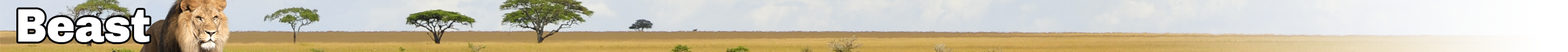
<style>
.page{position:relative;width:1568px;height:52px}
.page>*{position:absolute;margin:0}
.t1{font:47px "Chivo-Black";color:#ffffff}
</style>
<div class="page">
<p class="t1" style="left:18px;top:9px;width:132px;height:33px">Beast</p>
</div>
